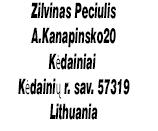
<style>
.page{position:relative;width:158px;height:131px;background:#ffffff}
.page>*{position:absolute;margin:0}
.t1{font:21.2px "Swiss721BT-BlackItalic";color:#000000;scale:0.46 1}
.t2{font:21.2px "MyriadPro-Regular";color:#000000;scale:0.46 1}
</style>
<div class="page">
<p class="t1" style="left:18px;top:2px;width:112px;height:118px;text-align:center">Zilvinas Peciulis<br>A.Kanapinsko20<br>K<span class="t2">ė</span>dainiai <br>K<span class="t2">ė</span>daini<span class="t2">ų</span> r. sav. 57319<br>Lithuania</p>
</div>
